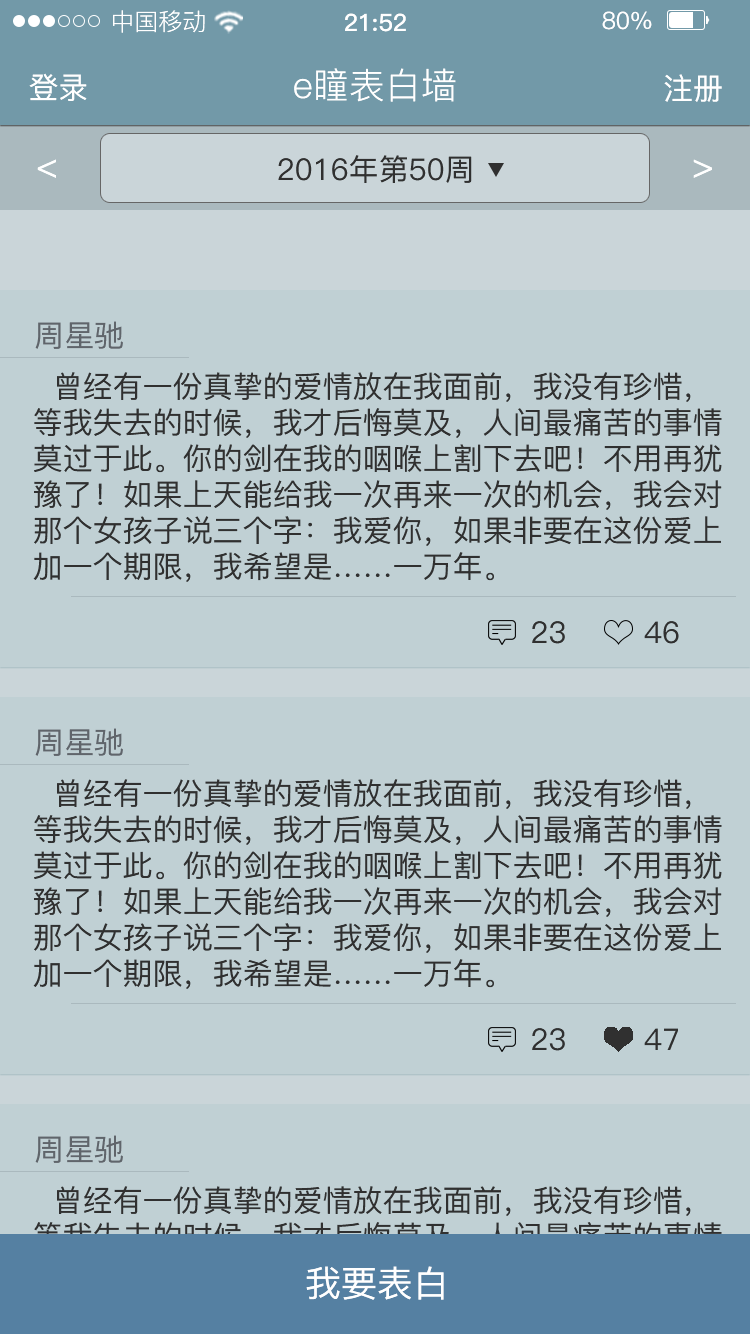
<style>
.page{position:relative;width:750px;height:1334px;background:#c0d0d4}
.page>*{position:absolute;margin:0}
.t1{font:24px "PingFang-SC-Regular";color:#ffffff}
.t2{font:24px "PingFang-SC-Bold";color:#ffffff}
.t3{font:24px "PingFang-SC-Medium";color:#ffffff}
.t4{font:30px "PingFang-SC-Medium";color:#ffffff}
.t5{font:36px "PingFang-SC-Regular";color:#ffffff}
.t6{font:30px "PingFang-SC-Medium";color:#303030}
.t7{font:30px "PingFang-SC-Medium";color:#60656b}
.t8{font:36px "PingFang-SC-Medium";color:#ffffff}
</style>
<div class="page">
<p class="t1" style="left:113px;top:10px;width:92px;height:23px">中国移动</p>
<p class="t2" style="left:345px;top:13px;width:61px;height:19px">21:52</p>
<p class="t3" style="left:602px;top:11px;width:50px;height:19px">80%</p>
<p class="t4" style="left:29px;top:73px;width:58px;height:28px">登录</p>
<p class="t5" style="left:294px;top:68px;width:162px;height:34px">e瞳表白墙</p>
<p class="t4" style="left:664px;top:74px;width:58px;height:28px">注册</p>
<p class="t6" style="left:278px;top:155px;width:194px;height:28px">2016年第50周</p>
<p class="t7" style="left:35px;top:321px;width:88px;height:28px">周星驰</p>
<p class="t6" style="left:33px;top:372px;width:689px;height:210px">曾经有一份真挚的爱情放在我面前，我没有珍惜，<br>等我失去的时候，我才后悔莫及，人间最痛苦的事情<br>莫过于此。你的剑在我的咽喉上割下去吧！不用再犹<br>豫了！如果上天能给我一次再来一次的机会，我会对<br>那个女孩子说三个字：我爱你，如果非要在这份爱上<br>加一个期限，我希望是……一万年。</p>
<p class="t6" style="left:532px;top:621px;width:33px;height:23px">23</p>
<p class="t6" style="left:644px;top:621px;width:35px;height:23px">46</p>
<p class="t7" style="left:35px;top:728px;width:88px;height:28px">周星驰</p>
<p class="t6" style="left:33px;top:779px;width:689px;height:210px">曾经有一份真挚的爱情放在我面前，我没有珍惜，<br>等我失去的时候，我才后悔莫及，人间最痛苦的事情<br>莫过于此。你的剑在我的咽喉上割下去吧！不用再犹<br>豫了！如果上天能给我一次再来一次的机会，我会对<br>那个女孩子说三个字：我爱你，如果非要在这份爱上<br>加一个期限，我希望是……一万年。</p>
<p class="t6" style="left:532px;top:1028px;width:33px;height:23px">23</p>
<p class="t6" style="left:644px;top:1028px;width:34px;height:22px">47</p>
<p class="t7" style="left:35px;top:1135px;width:88px;height:28px">周星驰</p>
<p class="t8" style="left:306px;top:1266px;width:138px;height:34px">我要表白</p>
</div>
